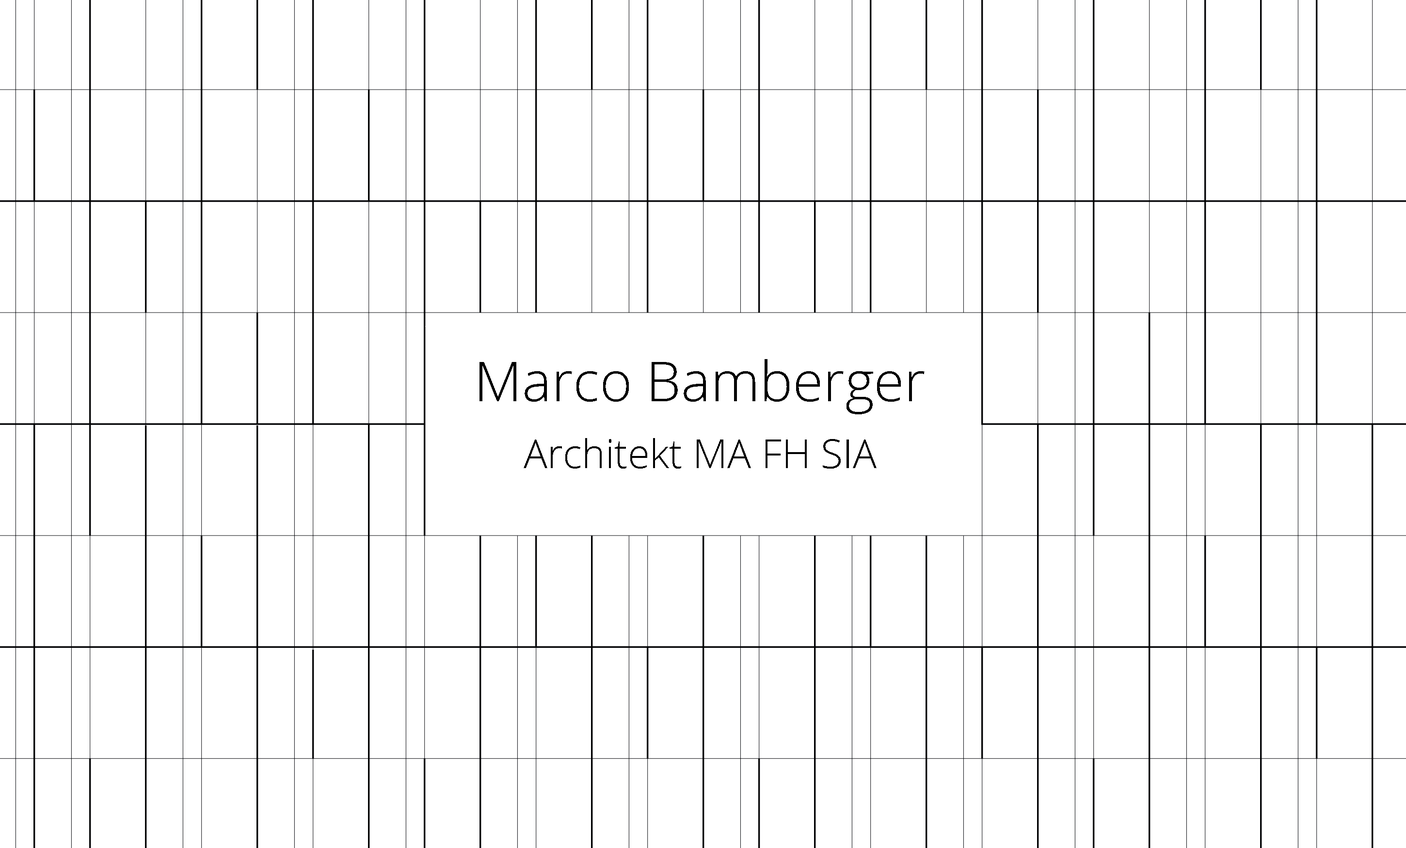
<style>
.page{position:relative;width:1406px;height:848px;background:#ffffff}
.page>*{position:absolute;margin:0}
.t1{font:40px/66.6px "OpenSans-Light";color:#000000}
.t2{font:55.5px/66.6px "OpenSans-Light";color:#000000}
</style>
<div class="page">
<p class="t1" style="left:479px;top:359px;width:445px;height:110px;text-align:center"><span class="t2">Marco Bamberger<br></span>Architekt MA FH SIA</p>
</div>
